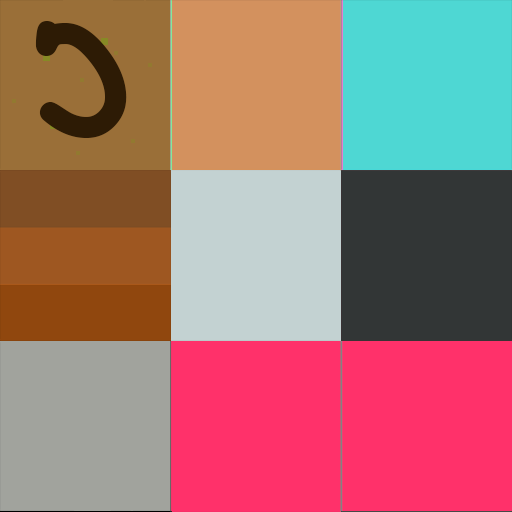
<style>
.page{position:relative;width:512px;height:512px;background:#ff316a}
.page>*{position:absolute;margin:0}
.t1{font:154.8px "ComicSansMS-Bold";color:#2d1b05}
</style>
<div class="page">
<p class="t1" style="left:35px;top:21px;width:92px;height:117px;rotate:180deg">C</p>
</div>
